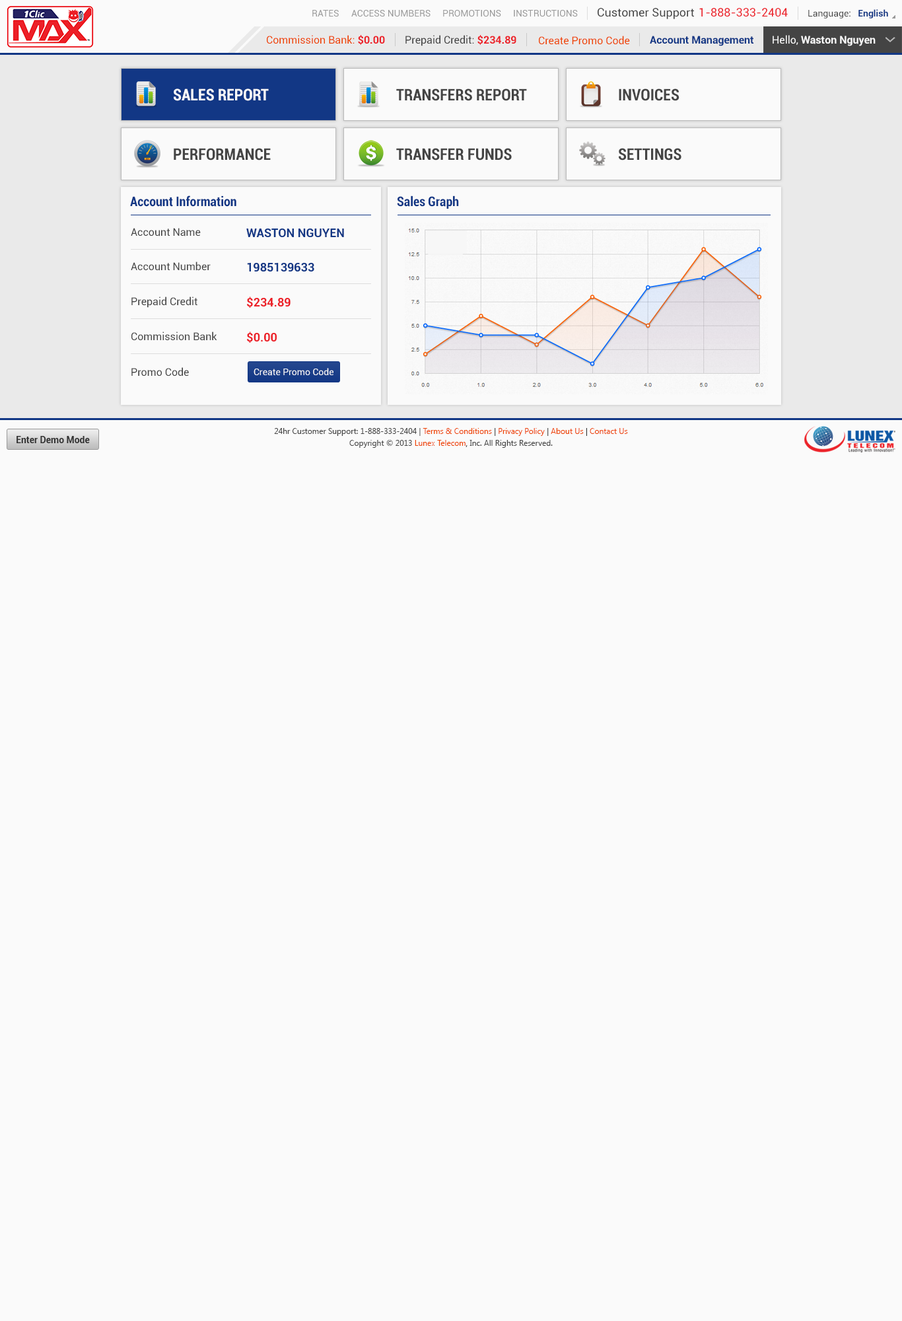
<style>
.page{position:relative;width:902px;height:1321px;background:#fafafa}
.page>*{position:absolute;margin:0}
.t1{font:9.2px "Roboto-Regular";color:#999999}
.t2{font:11.6px "Roboto-Regular";color:#444444}
.t3{font:11.6px "Roboto-Regular";color:#ec2029}
.t4{font:9.2px "Roboto-Regular";color:#444444}
.t5{font:9.2px "Roboto-Bold";color:#123785}
.t6{font:10.6px "Roboto-Regular";color:#ee4400}
.t7{font:10.6px "Roboto-Bold";color:#ec2028}
.t8{font:10.6px "Roboto-Regular";color:#444444}
.t9{font:10.6px "Roboto-Bold";color:#123785}
.t10{font:10.6px "Roboto-Bold";color:#fafafa}
.t11{font:10.6px "Roboto-Regular";color:#fafafa}
.t12{font:15.9px "Roboto-BoldCondensed";color:#fafafa}
.t13{font:15.9px "Roboto-BoldCondensed";color:#444444}
.t14{font:13.2px "Roboto-BoldCondensed";color:#123785}
.t15{font:11.9px "Roboto-Bold";color:#123785}
.t16{font:11.9px "Roboto-Bold";color:#ec2028}
.t17{font:9.2px "Roboto-Regular";color:#fafafa}
.t18{font:9.2px "Roboto-Bold";color:#333333}
.t19{font:7.9px/11.9px "SegoeUI";color:#444444}
.t20{font:7.9px/11.9px "SegoeUI";color:#ee4400}
.t21{font:7.9px/11.9px "SegoeUI";color:#333333}
</style>
<div class="page">
<p class="t1" style="left:312px;top:10px;width:27px;height:7px">RATES</p>
<p class="t1" style="left:351px;top:10px;width:80px;height:7px">ACCESS NUMBERS</p>
<p class="t1" style="left:443px;top:10px;width:58px;height:7px">PROMOTIONS</p>
<p class="t1" style="left:514px;top:10px;width:64px;height:7px">INSTRUCTIONS</p>
<p class="t2" style="left:598px;top:8px;width:96px;height:11px">Customer Support</p>
<p class="t3" style="left:700px;top:8px;width:88px;height:9px">1-888-333-2404</p>
<p class="t4" style="left:809px;top:9px;width:80px;height:9px">Language:   <span class="t5">English</span></p>
<p class="t6" style="left:267px;top:35px;width:118px;height:10px">Commission Bank: <span class="t7">$0.00</span></p>
<p class="t8" style="left:406px;top:35px;width:111px;height:11px">Prepaid Credit: <span class="t7">$234.89</span></p>
<p class="t6" style="left:539px;top:36px;width:91px;height:9px">Create Promo Code</p>
<p class="t9" style="left:650px;top:36px;width:104px;height:10px">Account Management</p>
<p class="t10" style="left:773px;top:35px;width:103px;height:11px"><span class="t11">Hello, </span>Waston Nguyen</p>
<p class="t12" style="left:174px;top:89px;width:95px;height:12px">SALES REPORT</p>
<p class="t13" style="left:396px;top:89px;width:131px;height:12px">TRANSFERS REPORT</p>
<p class="t13" style="left:619px;top:89px;width:61px;height:12px">INVOICES</p>
<p class="t13" style="left:174px;top:148px;width:97px;height:13px">PERFORMANCE</p>
<p class="t13" style="left:396px;top:148px;width:116px;height:13px">TRANSFER FUNDS</p>
<p class="t13" style="left:619px;top:148px;width:63px;height:13px">SETTINGS</p>
<p class="t14" style="left:130px;top:196px;width:107px;height:11px">Account Information</p>
<p class="t14" style="left:397px;top:196px;width:62px;height:13px">Sales Graph</p>
<p class="t8" style="left:131px;top:228px;width:70px;height:9px">Account Name</p>
<p class="t15" style="left:246px;top:229px;width:98px;height:8px">WASTON NGUYEN</p>
<p class="t8" style="left:131px;top:262px;width:80px;height:9px">Account Number</p>
<p class="t15" style="left:247px;top:262px;width:67px;height:10px">1985139633</p>
<p class="t8" style="left:131px;top:297px;width:67px;height:11px">Prepaid Credit</p>
<p class="t16" style="left:247px;top:297px;width:44px;height:11px">$234.89</p>
<p class="t8" style="left:131px;top:332px;width:86px;height:9px">Commission Bank</p>
<p class="t16" style="left:247px;top:332px;width:30px;height:11px">$0.00</p>
<p class="t8" style="left:131px;top:367px;width:58px;height:9px">Promo Code</p>
<p class="t17" style="left:254px;top:368px;width:80px;height:8px">Create Promo Code</p>
<p class="t18" style="left:17px;top:436px;width:73px;height:7px">Enter Demo Mode</p>
<p class="t19" style="left:274px;top:428px;width:354px;height:20px;text-align:center">24hr Customer Support: 1-888-333-2404 | <span class="t20">Terms &amp; Conditions</span><span class="t21"> | </span><span class="t20">Privacy Policy</span><span class="t21"> | </span><span class="t20">About Us</span><span class="t21"> | </span><span class="t20">Contact Us<br></span>Copyright © 2013 <span class="t20">Lunex Telecom</span><span class="t21">,</span> Inc. All Rights Reserved.</p>
</div>
